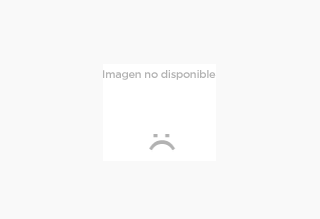
<style>
.page{position:relative;width:320px;height:219px;background:#f9f9f9}
.page>*{position:absolute;margin:0}
.t1{font:11px "GothamMedium";letter-spacing:-0.028em;color:#b2b2b2}
</style>
<div class="page">
<p class="t1" style="left:103px;top:70px;width:113px;height:10px">Imagen no disponible</p>
</div>
